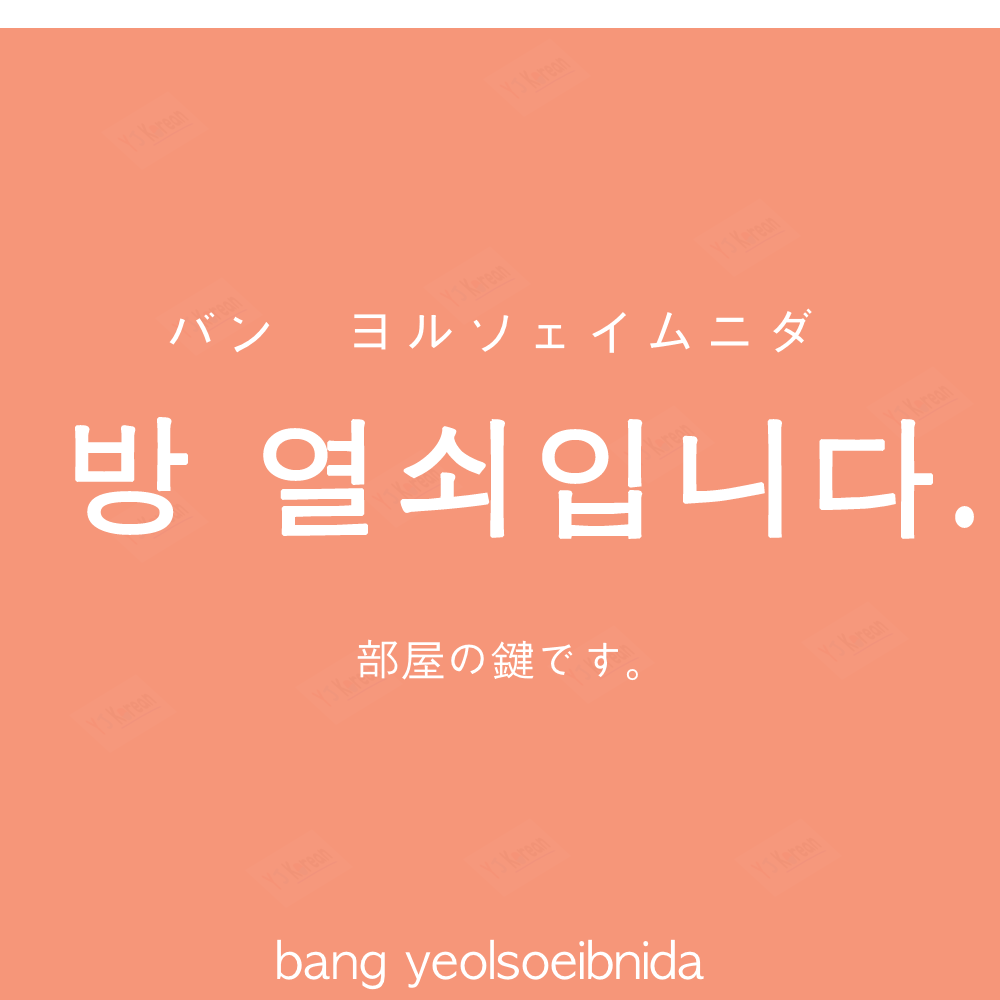
<style>
.page{position:relative;width:1000px;height:1000px;background:#f69679}
.page>*{position:absolute;margin:0}
.t1{font:60px "AppleGothic";color:#ffffff}
.t2{font:130px "AppleGothic";letter-spacing:0.04em;color:#ffffff;font-weight:bold}
.t3{font:45px "AppleGothic";color:#ffffff}
.t4{font:50px "AppleGothic";color:#ffffff}
</style>
<div class="page">
<p class="t1" style="left:169px;top:308px;width:643px;height:45px">バン　ヨルソェイムニダ</p>
<p class="t2" style="left:75px;top:417px;width:899px;height:122px">방 열쇠입니다.</p>
<p class="t3" style="left:357px;top:639px;width:281px;height:42px">部屋の鍵です。</p>
<p class="t4" style="left:277px;top:939px;width:427px;height:51px">bang yeolsoeibnida</p>
</div>
